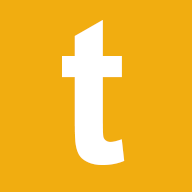
<style>
.page{position:relative;width:192px;height:192px;background:#f1ad10}
.page>*{position:absolute;margin:0}
.t1{font:203px "Arial-BoldMT";color:#ffffff}
</style>
<div class="page">
<p class="t1" style="left:62px;top:20px;width:63px;height:145px">t</p>
</div>
